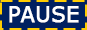
<style>
.page{position:relative;width:87px;height:30px;background:#002060}
.page>*{position:absolute;margin:0}
.t1{font:21px "Verdana";color:#ffffff;font-weight:bold}
</style>
<div class="page">
<p class="t1" style="left:9px;top:6px;width:70px;height:17px">PAUSE</p>
</div>
